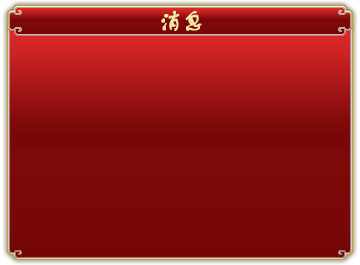
<style>
.page{position:relative;width:360px;height:265px}
.page>*{position:absolute;margin:0}
.t1{font:25px "FZSTK--GBK1-0";letter-spacing:-0.14em;color:#f1e8a5;font-weight:bold}
</style>
<div class="page">
<p class="t1" style="left:161px;top:10px;width:41px;height:21px">消息</p>
</div>
